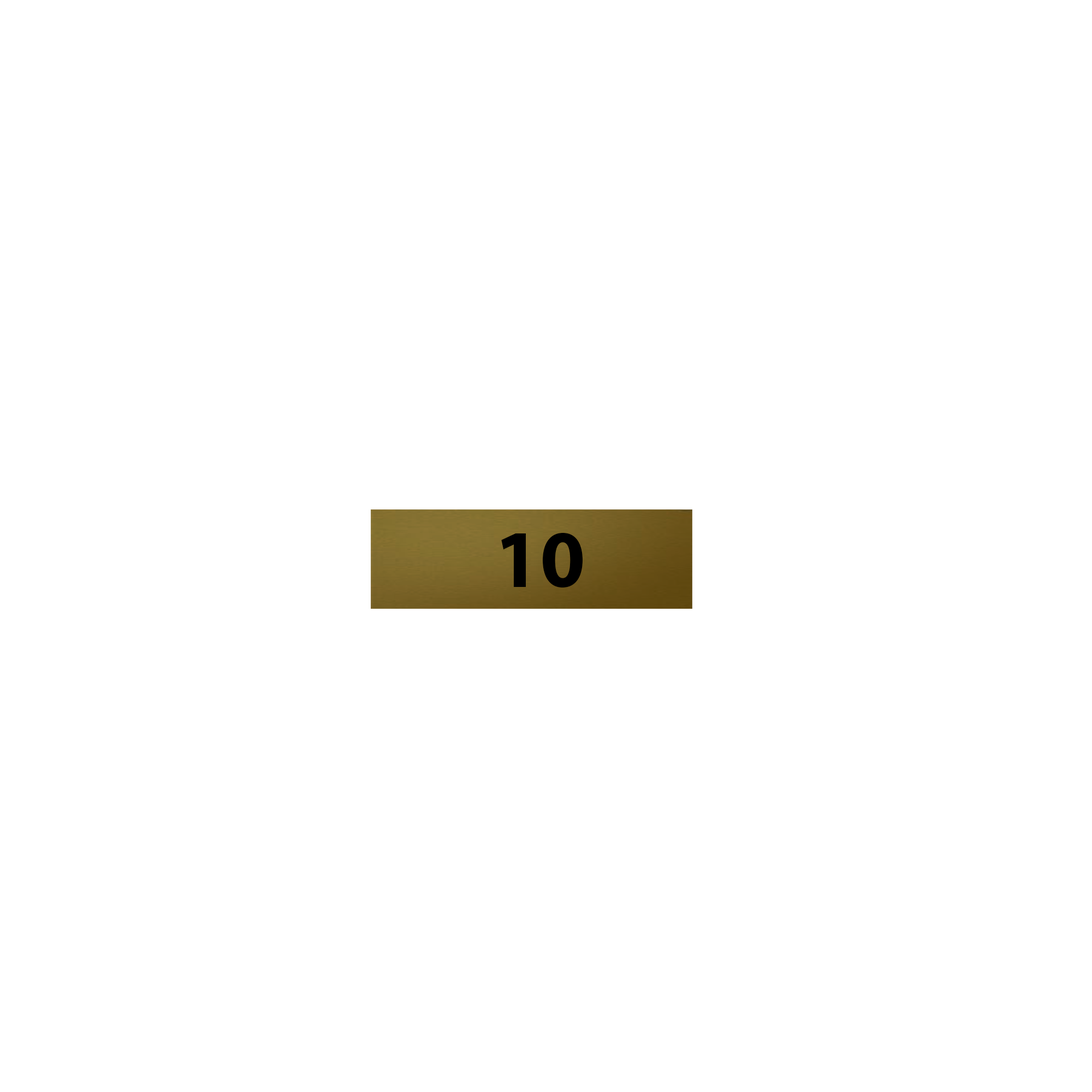
<style>
.page{position:relative;width:1092px;height:1092px;background:#ffffff}
.page>*{position:absolute;margin:0}
.t1{font:81.9px "MyriadPro-Bold";color:#000000}
</style>
<div class="page">
<p class="t1" style="left:501px;top:533px;width:82px;height:54px">10</p>
</div>
